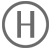
<style>
.page{position:relative;width:50px;height:50px;background:#ffffff}
.page>*{position:absolute;margin:0}
.t1{font:30px "TVpl";letter-spacing:0.05em;color:#6a6a6a}
</style>
<div class="page">
<p class="t1" style="left:17px;top:11px;width:18px;height:27px">H</p>
</div>
